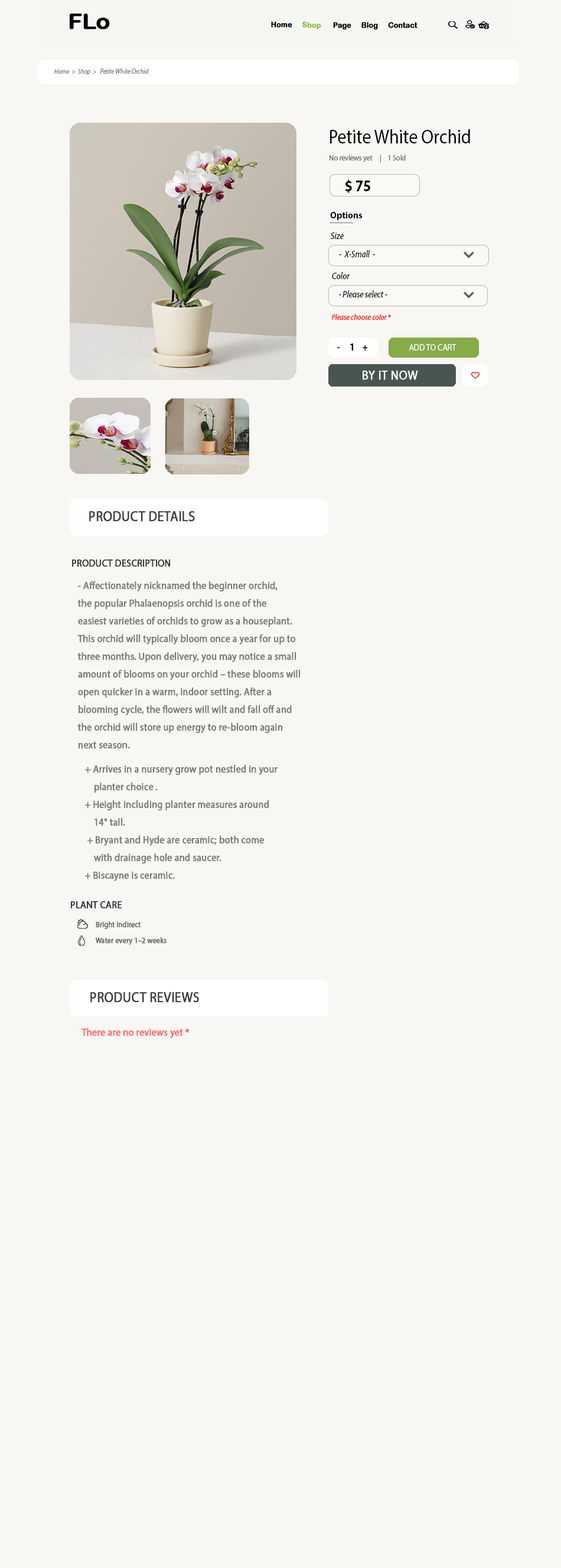
<style>
.page{position:relative;width:561px;height:1568px;background:#f8f7f3}
.page>*{position:absolute;margin:0}
.t1{font:21.5px "ArialRoundedMTBold";color:#020202;font-weight:bold;scale:1.07 1}
.t2{font:7.7px "ArialRoundedMTBold";color:#020202;font-weight:bold;scale:0.94 1}
.t3{font:7.7px "ArialRoundedMTBold";color:#92bc4d;font-weight:bold;scale:0.94 1}
.t4{font:7.3px "MyriadPro-It";color:#808080;scale:0.87 1}
.t5{font:6.5px "MyriadPro-It";color:#808080}
.t6{font:19.8px "MyriadPro-Regular";color:#000000;scale:0.89 1}
.t7{font:7.9px "MyriadPro-Regular";color:#6e6e6c;scale:0.89 1}
.t8{font:15.9px "MyriadPro-Bold";color:#000000;scale:0.89 1}
.t9{font:9.1px/3.5px "MyriadPro-Bold";color:#010101}
.t10{font:9.2px "MyriadPro-It";color:#000000;scale:0.89 1}
.t11{font:7.9px "MyriadPro-It";color:#fe0000;scale:0.89 1}
.t12{font:10.6px "MyriadPro-Bold";color:#060606;scale:0.89 1}
.t13{font:9.3px "MyriadPro-Regular";color:#fdfdfd;scale:0.89 1}
.t14{font:13.2px "MyriadPro-Regular";letter-spacing:0.01em;color:#fafafa;font-weight:bold;scale:0.89 1}
.t15{font:14.5px "MyriadPro-Regular";color:#404040;text-transform:uppercase;font-weight:bold;scale:0.89 1}
.t16{font:10.6px "MyriadPro-Regular";color:#3b3b3a;font-weight:bold;scale:0.89 1}
.t17{font:10.6px/17.7px "MyriadPro-Regular";color:#7d7c7a;font-weight:bold;scale:0.89 1}
.t18{font:10.6px "MyriadPro-Regular";color:#3b3b3a;text-transform:uppercase;font-weight:bold;scale:0.89 1}
.t19{font:7.9px "MyriadPro-Regular";color:#6e6e6c;font-weight:bold;scale:0.89 1}
.t20{font:10.6px "MyriadPro-Regular";color:#fd6867;font-weight:bold;scale:0.89 1}
</style>
<div class="page">
<p class="t1" style="left:69px;top:14px;width:41px;height:16px">FLo</p>
<p class="t2" style="left:271px;top:21px;width:146px;height:9px">Home     <span class="t3">Shop  </span>    Page     Blog     Contact</p>
<p class="t4" style="left:54px;top:68px;width:95px;height:7px"><span class="t5">Home  &gt;  Shop  &gt;   </span>Petite White Orchid</p>
<p class="t6" style="left:330px;top:129px;width:140px;height:14px">Petite White Orchid</p>
<p class="t7" style="left:329px;top:155px;width:76px;height:8px">No reviews yet     |    1 Sold</p>
<p class="t8" style="left:345px;top:179px;width:25px;height:14px">$ 75</p>
<p class="t9" style="left:330px;top:212px;width:32px;height:11px">Options<br>_____</p>
<p class="t10" style="left:330px;top:233px;width:13px;height:6px">Size</p>
<p class="t10" style="left:339px;top:250px;width:36px;height:7px">-  X-Small  -</p>
<p class="t10" style="left:332px;top:272px;width:18px;height:7px">Color</p>
<p class="t10" style="left:339px;top:290px;width:48px;height:7px">- Please select -</p>
<p class="t11" style="left:332px;top:314px;width:59px;height:6px">Please choose color *</p>
<p class="t12" style="left:337px;top:343px;width:31px;height:8px">-     1    +</p>
<p class="t13" style="left:409px;top:344px;width:47px;height:7px">ADD TO CART</p>
<p class="t14" style="left:362px;top:371px;width:56px;height:9px">BY IT NOW</p>
<p class="t15" style="left:89px;top:511px;width:106px;height:11px">Product details</p>
<p class="t16" style="left:72px;top:559px;width:98px;height:8px">PRODUCT DESCRIPTION</p>
<p class="t17" style="left:77px;top:581px;width:223px;height:168px">- Affectionately nicknamed the beginner orchid, <br>the popular Phalaenopsis orchid is one of the <br>easiest varieties of orchids to grow as a houseplant. <br>This orchid will typically bloom once a year for up to <br>three months. Upon delivery, you may notice a small <br>amount of blooms on your orchid – these blooms will <br>open quicker in a warm, indoor setting. After a <br>blooming cycle, the flowers will wilt and fall off and <br>the orchid will store up energy to re-bloom again <br>next season.</p>
<p class="t17" style="left:85px;top:765px;width:192px;height:117px">+ Arrives in a nursery grow pot nestled in your<br>    planter choice .<br>+ Height including planter measures around <br>    14" tall.<br> + Bryant and Hyde are ceramic; both come <br>    with drainage hole and saucer.<br>+ Biscayne is ceramic.</p>
<p class="t18" style="left:71px;top:901px;width:51px;height:8px">Plant Care</p>
<p class="t19" style="left:96px;top:921px;width:45px;height:8px">Bright indirect</p>
<p class="t19" style="left:95px;top:937px;width:71px;height:8px">Water every 1–2 weeks</p>
<p class="t15" style="left:90px;top:992px;width:109px;height:11px">Product reviews</p>
<p class="t20" style="left:81px;top:1028px;width:108px;height:11px">There are no reviews yet *</p>
</div>
